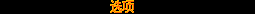
<style>
.page{position:relative;width:255px;height:14px;background:#000000}
.page>*{position:absolute;margin:0}
.t1{font:12px "SimSun";color:#ffbf00}
.t2{font:12px "SimSun"}
.t3{font:12px "SimSun";color:#ff5f00}
</style>
<div class="page">
<p class="t1" style="left:110px;top:1px;width:23px;height:12px">选项</p>
<p class="t1" style="left:110px;top:0px;width:23px;height:12px">选项</p>
<p class="t2" style="left:111px;top:0px;width:23px;height:12px">选项</p>
<p class="t3" style="left:111px;top:1px;width:23px;height:12px">选项</p>
</div>
